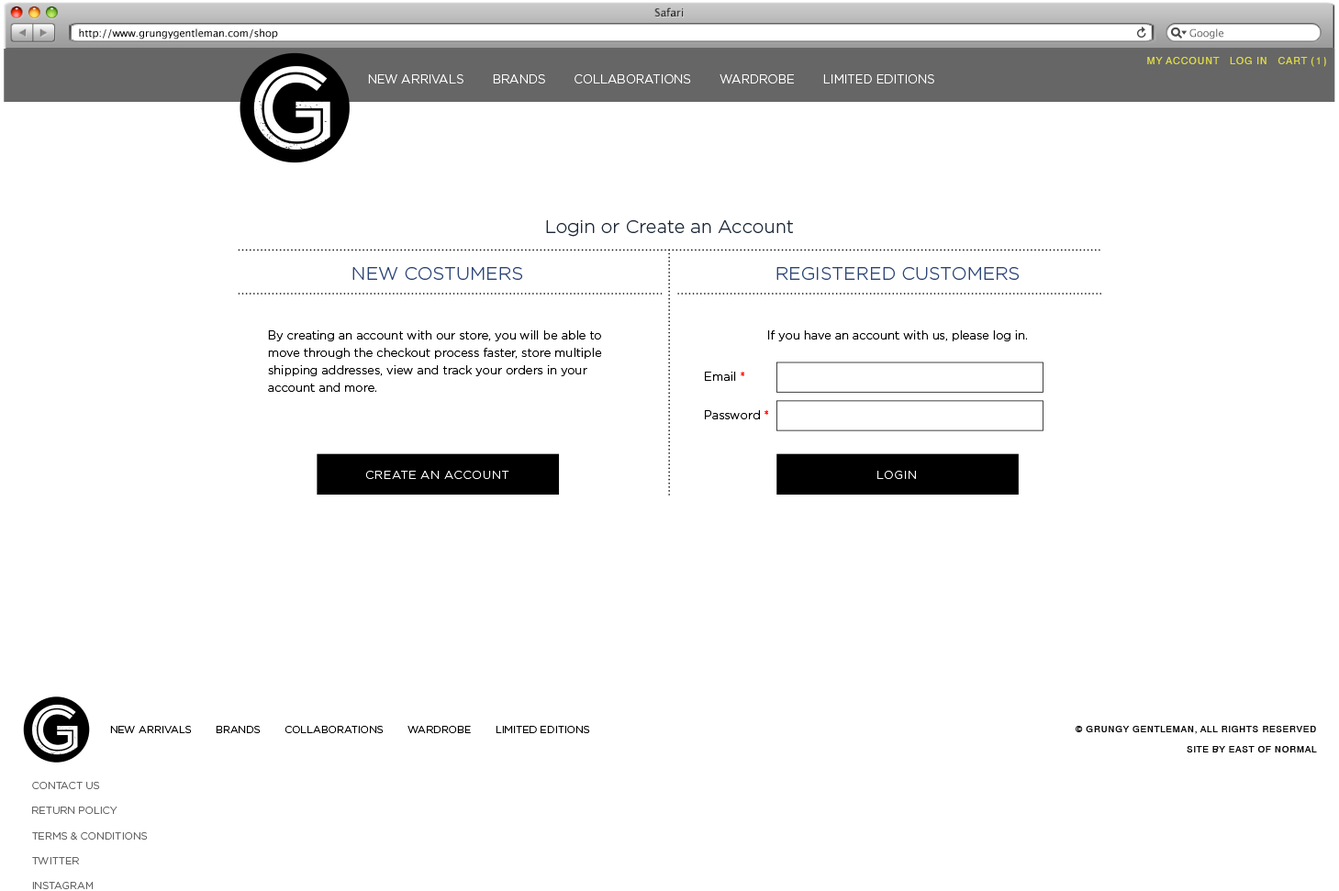
<style>
.page{position:relative;width:1339px;height:891px;background:#ffffff}
.page>*{position:absolute;margin:0}
.t1{font:10.1px "LucidaGrande";color:#000000}
.t2{font:10.1px "LucidaGrande";color:#5e5e5f}
.t3{font:10.1px "Helvetica";letter-spacing:0.06em;color:#e1dc44;text-transform:uppercase}
.t4{font:11.9px "GothamHTF-Light";color:#ffffff}
.t5{font:18.3px "GothamHTF-Light";color:#1e2938}
.t6{font:18.3px "GothamHTF-Light";color:#2c4577}
.t7{font:11.9px/17.4px "GothamHTF-Light";color:#000000}
.t8{font:11.9px "GothamHTF-Light";color:#000000}
.t9{font:11.9px "GothamHTF-Light";color:#ff0000}
.t10{font:11.8px "GothamHTF-Light";letter-spacing:0.04em;color:#ffffff;text-transform:uppercase}
.t11{font:10.1px "GothamHTF-Light";color:#000000}
.t12{font:9.2px "Helvetica";letter-spacing:0.06em;color:#000000;text-transform:uppercase}
.t13{font:10.1px/25px "GothamHTF-Light";color:#666666}
</style>
<div class="page">
<p class="t1" style="left:79px;top:28px;width:199px;height:11px">http://www.grungygentleman.com/shop</p>
<p class="t2" style="left:1189px;top:28px;width:34px;height:11px">Google</p>
<p class="t3" style="left:1147px;top:57px;width:179px;height:10px">My Account   LOG IN   Cart (1)</p>
<p class="t4" style="left:368px;top:74px;width:566px;height:9px">NEW ARRIVALS        BRANDS        COLLABORATIONS        WARDROBE        LIMITED EDITIONS</p>
<p class="t5" style="left:546px;top:220px;width:247px;height:17px">Login or Create an Account</p>
<p class="t6" style="left:352px;top:267px;width:170px;height:13px">NEW COSTUMERS</p>
<p class="t6" style="left:776px;top:267px;width:242px;height:13px">REGISTERED CUSTOMERS</p>
<p class="t7" style="left:268px;top:330px;width:334px;height:62px">By creating an account with our store, you will be able to move through the checkout process faster, store multiple shipping addresses, view and track your orders in your account and more.</p>
<p class="t8" style="left:768px;top:330px;width:259px;height:11px">If you have an account with us, please log in.</p>
<p class="t8" style="left:705px;top:372px;width:39px;height:9px">Email <span class="t9">*</span></p>
<p class="t8" style="left:705px;top:410px;width:63px;height:9px">Password <span class="t9">*</span></p>
<p class="t10" style="left:365px;top:471px;width:144px;height:8px">Create an Account</p>
<p class="t10" style="left:877px;top:471px;width:39px;height:8px">LOGIN</p>
<p class="t11" style="left:110px;top:726px;width:480px;height:7px">NEW ARRIVALS        BRANDS        COLLABORATIONS        WARDROBE        LIMITED EDITIONS</p>
<p class="t12" style="left:1075px;top:726px;width:241px;height:8px">© Grungy Gentleman, All Rights Reserved</p>
<p class="t12" style="left:1186px;top:746px;width:131px;height:6px">Site by EAST of NORMAL</p>
<p class="t13" style="left:32px;top:782px;width:116px;height:107px">CONTACT US<br>RETURN POLICY<br>TERMS &amp; CONDITIONS<br>TWITTER<br>INSTAGRAM</p>
</div>
